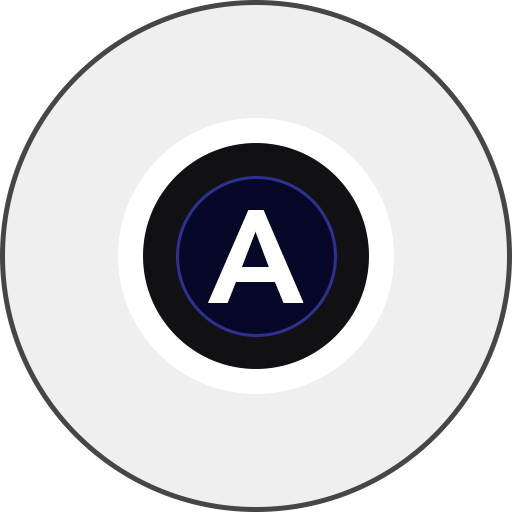
<style>
.page{position:relative;width:512px;height:512px;background:#efefef}
.page>*{position:absolute;margin:0}
.t1{font:130px "AvenirNext-DemiBold";color:#ffffff;font-weight:bold}
</style>
<div class="page">
<p class="t1" style="left:208px;top:210px;width:96px;height:93px">A</p>
</div>
